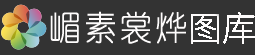
<style>
.page{position:relative;width:255px;height:55px;background:#333333}
.page>*{position:absolute;margin:0}
.t1{font:34px "YouYuan";letter-spacing:0.1em;color:#fefcfc;scale:0.95 1}
</style>
<div class="page">
<p class="t1" style="left:50px;top:11px;width:136px;height:33px">嵋素裳烨</p>
</div>
